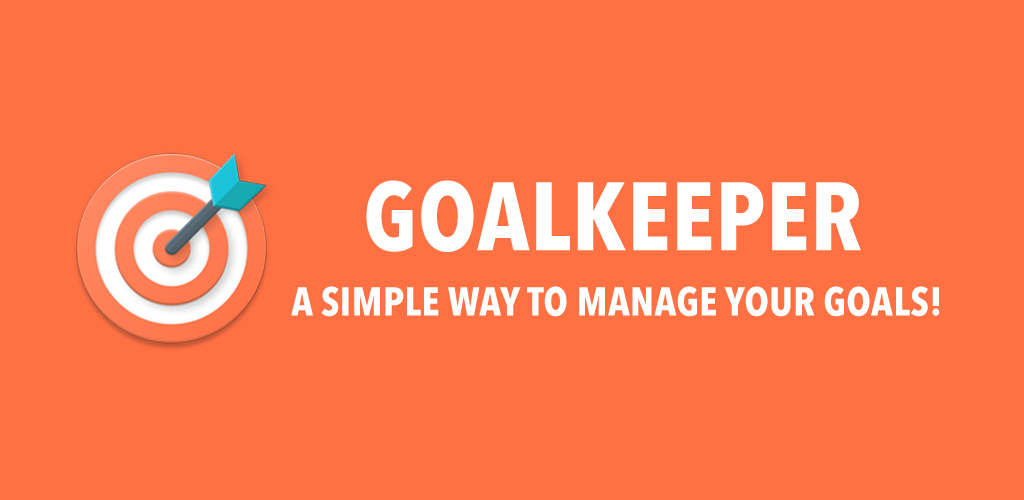
<style>
.page{position:relative;width:1024px;height:500px;background:#ff7043}
.page>*{position:absolute;margin:0}
.t1{font:96px "AvenirNextCondensed-Bold";letter-spacing:0.01em;color:#ffffff;text-transform:uppercase}
.t2{font:40px "AvenirNextCondensed-Bold";letter-spacing:0.01em;color:#ffffff;text-transform:uppercase}
</style>
<div class="page">
<p class="t1" style="left:366px;top:180px;width:495px;height:72px">Goalkeeper</p>
<p class="t2" style="left:291px;top:286px;width:649px;height:31px">A simple way to manage your goals!</p>
</div>
